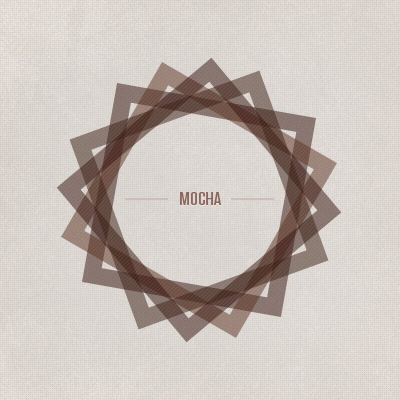
<style>
.page{position:relative;width:400px;height:400px}
.page>*{position:absolute;margin:0}
.t1{font:18.1px "Tungsten-Medium";color:#8b665d;scale:1.21 1}
</style>
<div class="page">
<p class="t1" style="left:180px;top:192px;width:41px;height:13px">MOCHA</p>
</div>
